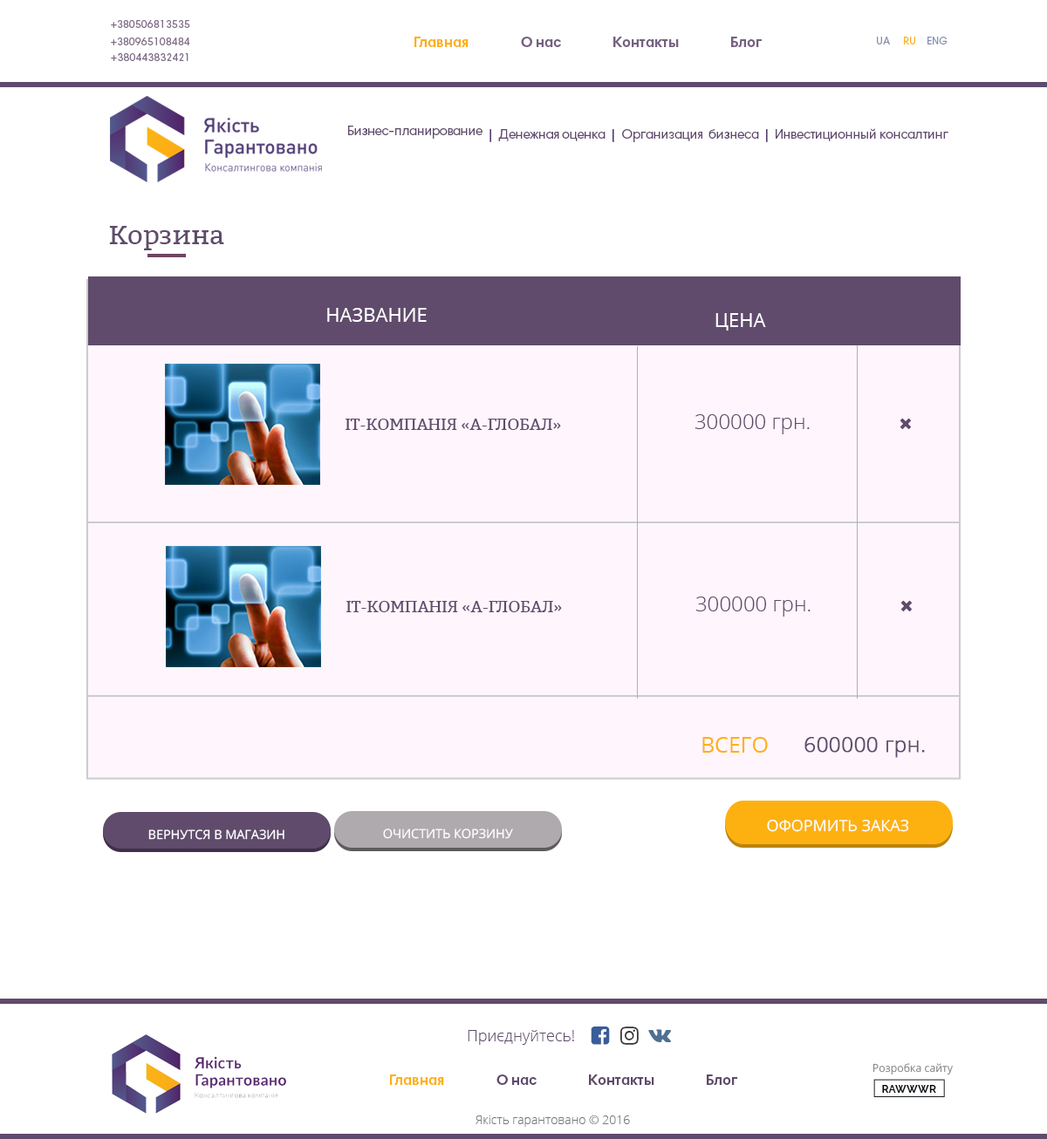
<style>
.page{position:relative;width:1047px;height:1139px;background:#ffffff}
.page>*{position:absolute;margin:0}
.t1{font:10.5px "HarmoniaSansProCyr-Regular";color:#806f89}
.t2{font:14.8px "HarmoniaSansProCyr-Bold";color:#fdaf19}
.t3{font:14.8px "HarmoniaSansProCyr-Bold";color:#604b6c}
.t4{font:10.5px "HarmoniaSansProCyr-Regular";color:#858eb3}
.t5{font:10.5px "HarmoniaSansProCyr-Regular";color:#fdaf19}
.t6{font:13.3px "HarmoniaSansProCyr-Regular";letter-spacing:-0.025em;color:#604b6c}
.t7{font:13.3px "HarmoniaSansProCyr-Bold";color:#533774}
.t8{font:13.3px "HarmoniaSansProCyr-Regular";letter-spacing:-0.017em;color:#604a6e}
.t9{font:26.2px "Bitter-Regular";color:#604b6c;scale:1.04 1}
.t10{font:19.2px "OpenSans";color:#ffffff}
.t11{font:15.7px "Bitter-Regular";color:#604b6c;scale:1.04 1}
.t12{font:20.9px "OpenSans-Light";color:#604b6c}
.t13{font:21.8px "OpenSans";color:#fdb111;text-transform:uppercase}
.t14{font:20.9px "OpenSans-Light";color:#604b6c;font-weight:bold}
.t15{font:15.7px "OpenSans";color:#ffffff;text-transform:uppercase}
.t16{font:12.6px "OpenSans";color:#ffffff;text-transform:uppercase}
.t17{font:15.7px "OpenSans-Light";color:#604b6c}
.t18{font:10.8px "OpenSans";color:#8a8a8b}
.t19{font:14.8px "HarmoniaSansProCyr-Bold";color:#fdb111}
.t20{font:10.8px "Raleway-Bold";color:#07080c}
.t21{font:12.2px "OpenSans-Light";color:#787878}
</style>
<div class="page">
<p class="t1" style="left:111px;top:20px;width:79px;height:8px">+380506813535</p>
<p class="t1" style="left:111px;top:38px;width:79px;height:7px">+380965108484</p>
<p class="t2" style="left:414px;top:37px;width:54px;height:10px">Главная</p>
<p class="t3" style="left:521px;top:37px;width:40px;height:10px">О нас</p>
<p class="t3" style="left:613px;top:37px;width:66px;height:10px">Контакты</p>
<p class="t3" style="left:731px;top:37px;width:30px;height:10px">Блог</p>
<p class="t4" style="left:877px;top:37px;width:38px;height:7px">UA    <span class="t5"> RU</span></p>
<p class="t4" style="left:927px;top:37px;width:20px;height:7px">ENG</p>
<p class="t1" style="left:111px;top:53px;width:77px;height:8px">+380443832421</p>
<p class="t6" style="left:348px;top:126px;width:134px;height:13px">Бизнес-планирование</p>
<p class="t7" style="left:489px;top:129px;width:2px;height:13px">|</p>
<p class="t8" style="left:498px;top:129px;width:107px;height:12px">Денежная оценка</p>
<p class="t7" style="left:612px;top:129px;width:2px;height:13px">|</p>
<p class="t8" style="left:622px;top:129px;width:137px;height:13px">Организация  бизнеса</p>
<p class="t7" style="left:766px;top:129px;width:2px;height:13px">|</p>
<p class="t8" style="left:775px;top:128px;width:173px;height:13px">Инвестиционный консалтинг</p>
<p class="t9" style="left:109px;top:226px;width:115px;height:24px">Корзина</p>
<p class="t10" style="left:327px;top:308px;width:100px;height:14px">НАЗВАНИЕ</p>
<p class="t10" style="left:715px;top:313px;width:51px;height:18px">ЦЕНА</p>
<p class="t11" style="left:345px;top:419px;width:216px;height:11px">ІТ-КОМПАНІЯ «А-ГЛОБАЛ»</p>
<p class="t12" style="left:695px;top:414px;width:114px;height:20px">300000 грн.</p>
<p class="t11" style="left:346px;top:601px;width:216px;height:11px">ІТ-КОМПАНІЯ «А-ГЛОБАЛ»</p>
<p class="t12" style="left:696px;top:597px;width:114px;height:20px">300000 грн.</p>
<p class="t13" style="left:702px;top:737px;width:66px;height:16px">Всего</p>
<p class="t14" style="left:804px;top:737px;width:121px;height:21px">600000 грн.</p>
<p class="t15" style="left:767px;top:819px;width:142px;height:13px">оформить заказ</p>
<p class="t16" style="left:148px;top:830px;width:136px;height:10px">вернутся в магазин</p>
<p class="t16" style="left:383px;top:829px;width:130px;height:10px">очистить корзину</p>
<p class="t17" style="left:468px;top:1030px;width:106px;height:15px">Приєднуйтесь!</p>
<p class="t18" style="left:872px;top:1063px;width:81px;height:13px">Розробка сайту</p>
<p class="t19" style="left:390px;top:1075px;width:54px;height:10px">Главная</p>
<p class="t3" style="left:496px;top:1075px;width:40px;height:10px">О нас</p>
<p class="t3" style="left:589px;top:1075px;width:65px;height:10px">Контакты</p>
<p class="t3" style="left:707px;top:1075px;width:30px;height:10px">Блог</p>
<p class="t20" style="left:882px;top:1085px;width:54px;height:8px">RAWWWR</p>
<p class="t21" style="left:475px;top:1116px;width:155px;height:11px">Якість гарантовано © 2016</p>
</div>
